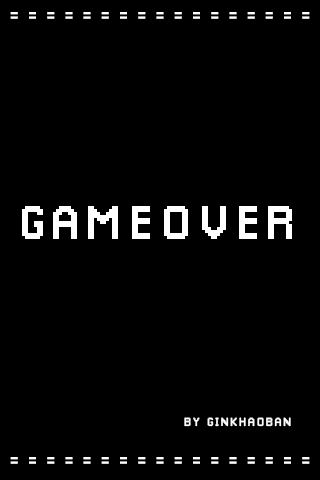
<style>
.page{position:relative;width:320px;height:480px;background:#000000}
.page>*{position:absolute;margin:0}
.t1{font:18px "Pixellari";letter-spacing:0.1em;color:#ffffff}
.t2{font:48px "Pixellari";letter-spacing:0.1em;color:#ffffff}
.t3{font:12px "Pixellari";letter-spacing:0.1em;color:#ffffff}
</style>
<div class="page">
<p class="t1" style="left:10px;top:12px;width:300px;height:7px">= = = = = = = = = = = = = = = = =</p>
<p class="t2" style="left:22px;top:206px;width:270px;height:33px">GAMEOVER</p>
<p class="t3" style="left:184px;top:417px;width:107px;height:10px">BY GINKHAOBAN</p>
<p class="t1" style="left:10px;top:457px;width:300px;height:7px">= = = = = = = = = = = = = = = = =</p>
</div>
